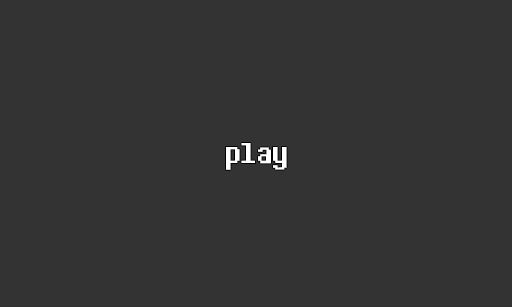
<style>
.page{position:relative;width:512px;height:307px;background:#333333}
.page>*{position:absolute;margin:0}
.t1{font:30px "SVN-DeterminationSans";color:#ffffff}
</style>
<div class="page">
<p class="t1" style="left:226px;top:143px;width:61px;height:27px">play</p>
</div>
